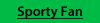
<style>
.page{position:relative;width:100px;height:23px;background:#00ba46}
.page>*{position:absolute;margin:0}
.t1{font:14px "MyriadPro-Semibold";color:#000000;text-decoration:underline}
</style>
<div class="page">
<p class="t1" style="left:17px;top:6px;width:66px;height:13px">Sporty Fan</p>
</div>
